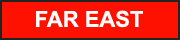
<style>
.page{position:relative;width:180px;height:40px;background:#ff1100}
.page>*{position:absolute;margin:0}
.t1{font:22px "Arial-BoldMT";color:#ffffff}
</style>
<div class="page">
<p class="t1" style="left:36px;top:10px;width:107px;height:18px">FAR EAST</p>
</div>
